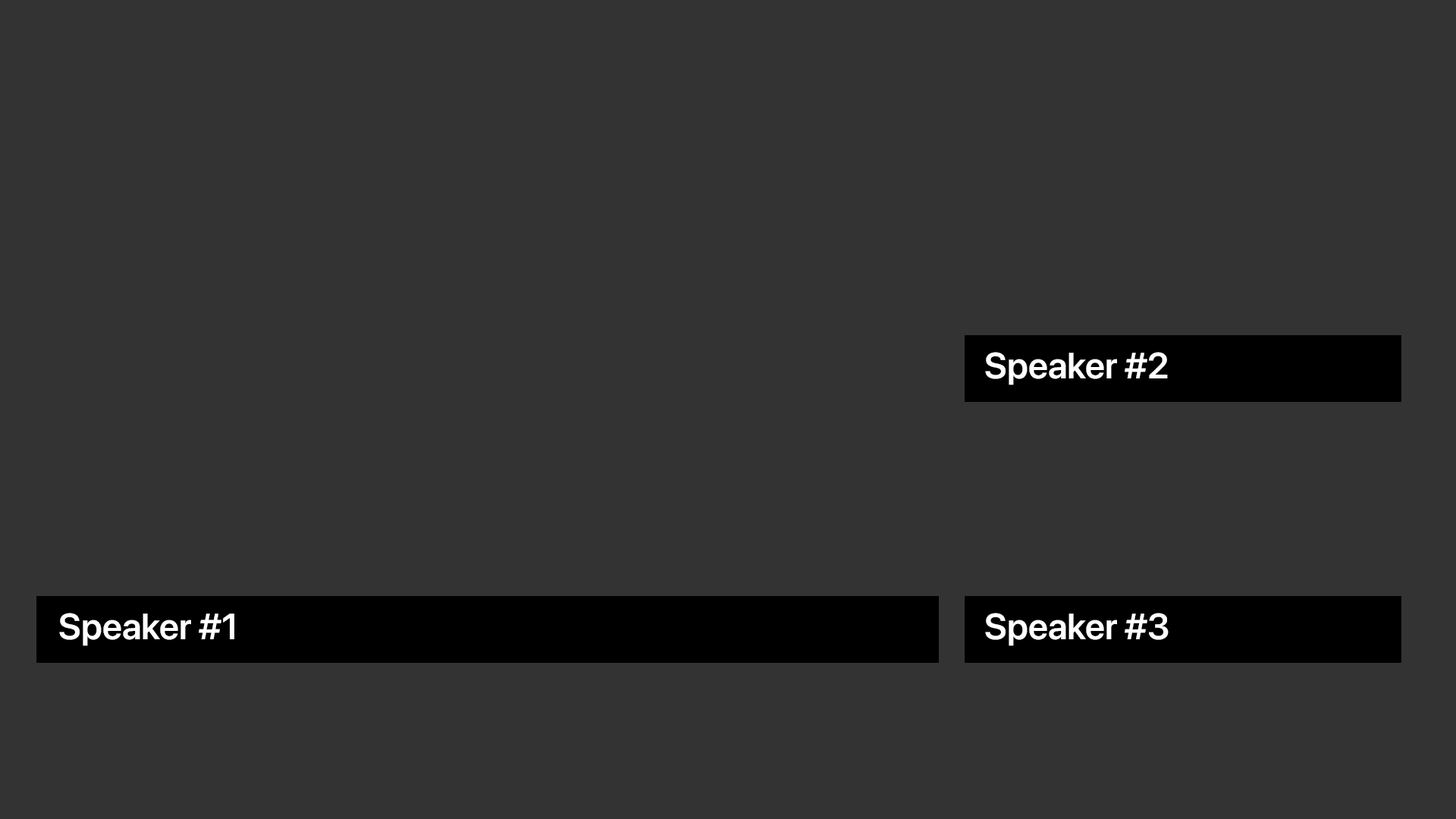
<style>
.page{position:relative;width:1456px;height:819px;background:#333333}
.page>*{position:absolute;margin:0}
.t1{font:36.4px "SFProDisplay-Semibold";color:#ffffff}
</style>
<div class="page">
<p class="t1" style="left:985px;top:352px;width:183px;height:33px">Speaker #2</p>
<p class="t1" style="left:59px;top:613px;width:175px;height:33px">Speaker #1</p>
<p class="t1" style="left:985px;top:613px;width:184px;height:33px">Speaker #3</p>
</div>
